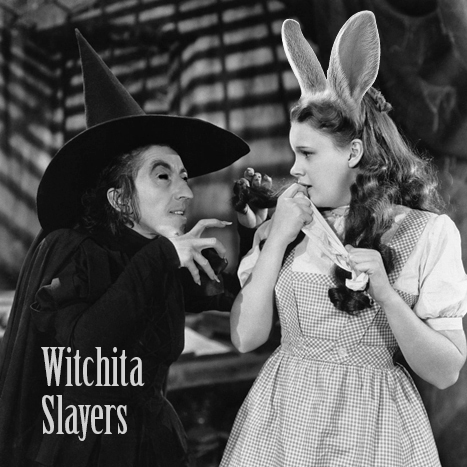
<style>
.page{position:relative;width:467px;height:467px}
.page>*{position:absolute;margin:0}
.t1{font:52px/48px "BirchStd";color:#d1d1d1}
</style>
<div class="page">
<p class="t1" style="left:41px;top:347px;width:104px;height:94px">Witchita<br>Slayers</p>
</div>
